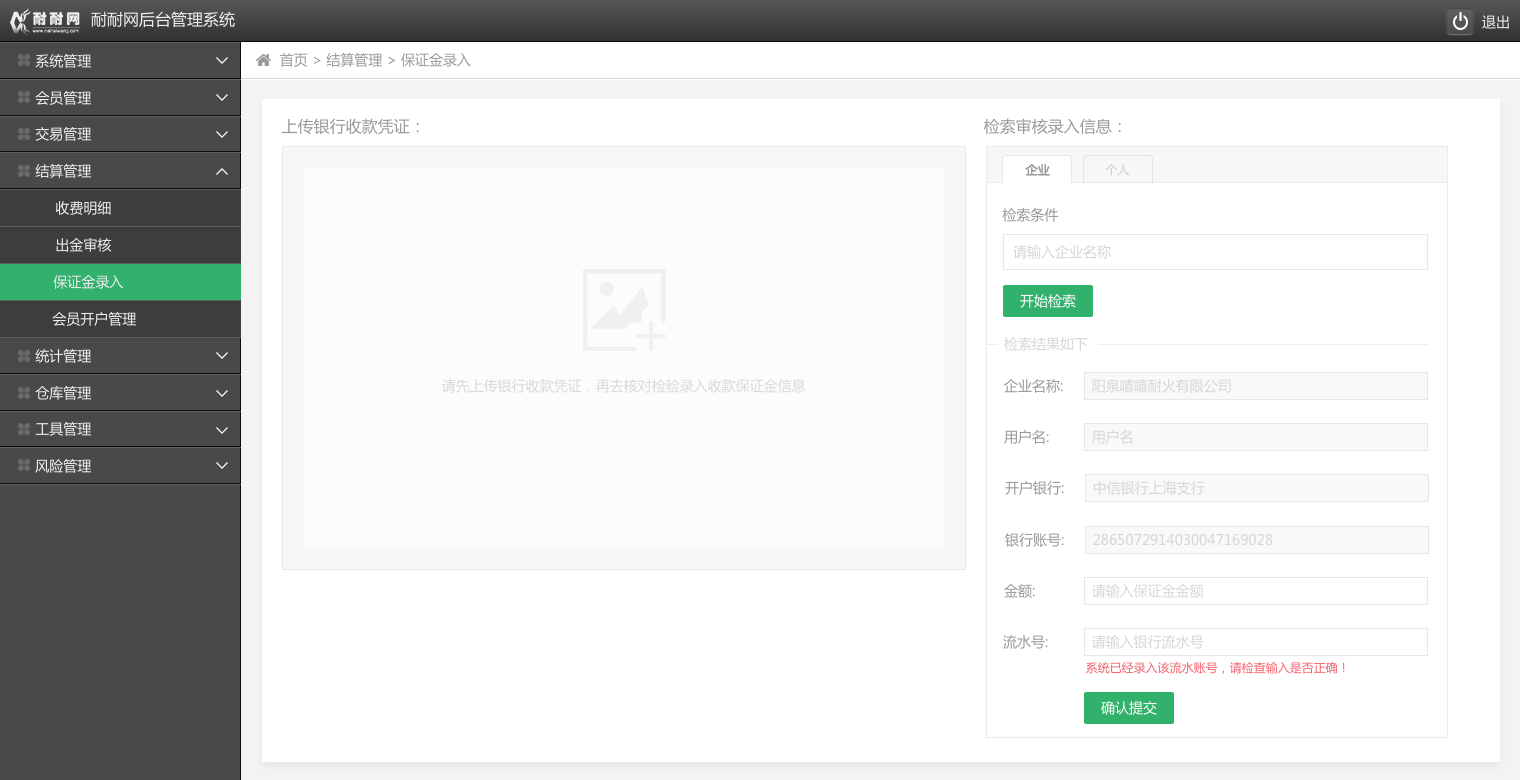
<style>
.page{position:relative;width:1520px;height:780px;background:#ffffff}
.page>*{position:absolute;margin:0}
.t1{font:16px "MicrosoftYaHei";color:#efefef}
.t2{font:14px "MicrosoftYaHei";color:#efefef}
.t3{font:14px "MicrosoftYaHei";color:#999999}
.t4{font:16px "MicrosoftYaHei";color:#999999}
.t5{font:12px "MicrosoftYaHei";color:#999999;font-weight:bold}
.t6{font:12px "MicrosoftYaHei";color:#cccccc}
.t7{font:14px "MicrosoftYaHei";color:#d6d6d6}
.t8{font:14px "MicrosoftYaHei";color:#fffcfc}
.t9{font:14px "MicrosoftYaHei";color:#d9d9d9}
.t10{font:12px "MicrosoftYaHei";color:#f4626c}
</style>
<div class="page">
<p class="t1" style="left:91px;top:11px;width:144px;height:17px">耐耐网后台管理系统</p>
<p class="t2" style="left:1482px;top:15px;width:27px;height:14px">退出</p>
<p class="t2" style="left:35px;top:54px;width:57px;height:14px">系统管理</p>
<p class="t3" style="left:280px;top:53px;width:191px;height:14px">首页 &gt; 结算管理 &gt; 保证金录入</p>
<p class="t2" style="left:35px;top:91px;width:57px;height:14px">会员管理</p>
<p class="t4" style="left:282px;top:118px;width:137px;height:17px">上传银行收款凭证：</p>
<p class="t4" style="left:983px;top:118px;width:138px;height:17px">检索审核录入信息：</p>
<p class="t2" style="left:35px;top:127px;width:57px;height:14px">交易管理</p>
<p class="t2" style="left:35px;top:164px;width:57px;height:14px">结算管理</p>
<p class="t5" style="left:1025px;top:164px;width:25px;height:12px">企业</p>
<p class="t6" style="left:1105px;top:164px;width:24px;height:12px">个人</p>
<p class="t2" style="left:55px;top:201px;width:56px;height:14px">收费明细</p>
<p class="t3" style="left:1002px;top:208px;width:57px;height:14px">检索条件</p>
<p class="t2" style="left:56px;top:238px;width:56px;height:14px">出金审核</p>
<p class="t7" style="left:1013px;top:245px;width:98px;height:14px">请输入企业名称</p>
<p class="t2" style="left:53px;top:275px;width:70px;height:14px">保证金录入</p>
<p class="t8" style="left:1020px;top:294px;width:56px;height:14px">开始检索</p>
<p class="t2" style="left:52px;top:312px;width:85px;height:14px">会员开户管理</p>
<p class="t7" style="left:1004px;top:337px;width:84px;height:14px">检索结果如下</p>
<p class="t2" style="left:35px;top:349px;width:57px;height:14px">统计管理</p>
<p class="t2" style="left:35px;top:386px;width:57px;height:14px">仓库管理</p>
<p class="t9" style="left:441px;top:379px;width:365px;height:14px">请先上传银行收款凭证，再去核对检验录入收款保证金信息</p>
<p class="t3" style="left:1004px;top:379px;width:59px;height:14px">企业名称:</p>
<p class="t7" style="left:1092px;top:379px;width:139px;height:14px">阳泉嘻嘻耐火有限公司</p>
<p class="t2" style="left:35px;top:422px;width:57px;height:14px">工具管理</p>
<p class="t3" style="left:1004px;top:430px;width:45px;height:14px">用户名:</p>
<p class="t7" style="left:1092px;top:430px;width:41px;height:14px">用户名</p>
<p class="t2" style="left:35px;top:459px;width:57px;height:14px">风险管理</p>
<p class="t3" style="left:1005px;top:481px;width:59px;height:14px">开户银行:</p>
<p class="t7" style="left:1093px;top:481px;width:112px;height:14px">中信银行上海支行</p>
<p class="t3" style="left:1005px;top:533px;width:59px;height:14px">银行账号:</p>
<p class="t7" style="left:1093px;top:533px;width:180px;height:13px">2865072914030047169028</p>
<p class="t3" style="left:1004px;top:584px;width:31px;height:14px">金额:</p>
<p class="t7" style="left:1091px;top:584px;width:113px;height:14px">请输入保证金金额</p>
<p class="t3" style="left:1003px;top:635px;width:45px;height:14px">流水号:</p>
<p class="t7" style="left:1091px;top:635px;width:113px;height:14px">请输入银行流水号</p>
<p class="t10" style="left:1085px;top:662px;width:260px;height:12px">系统已经录入该流水账号，请检查输入是否正确！</p>
<p class="t8" style="left:1101px;top:701px;width:56px;height:14px">确认提交</p>
</div>
